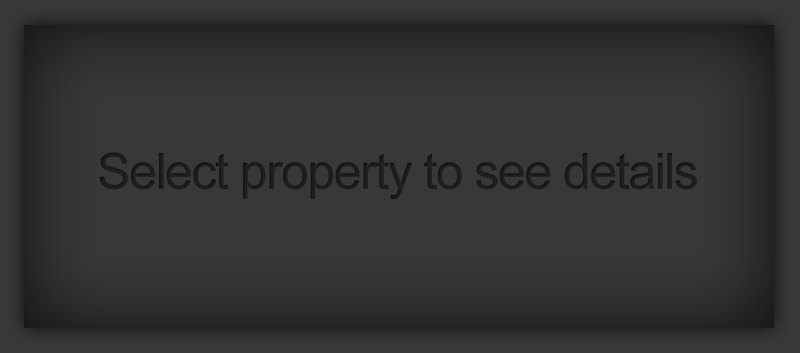
<style>
.page{position:relative;width:800px;height:353px;background:#383838}
.page>*{position:absolute;margin:0}
.t1{font:50px "ArialMT";letter-spacing:-0.03em;color:#242424}
</style>
<div class="page">
<p class="t1" style="left:99px;top:152px;width:598px;height:48px">Select property to see details</p>
</div>
